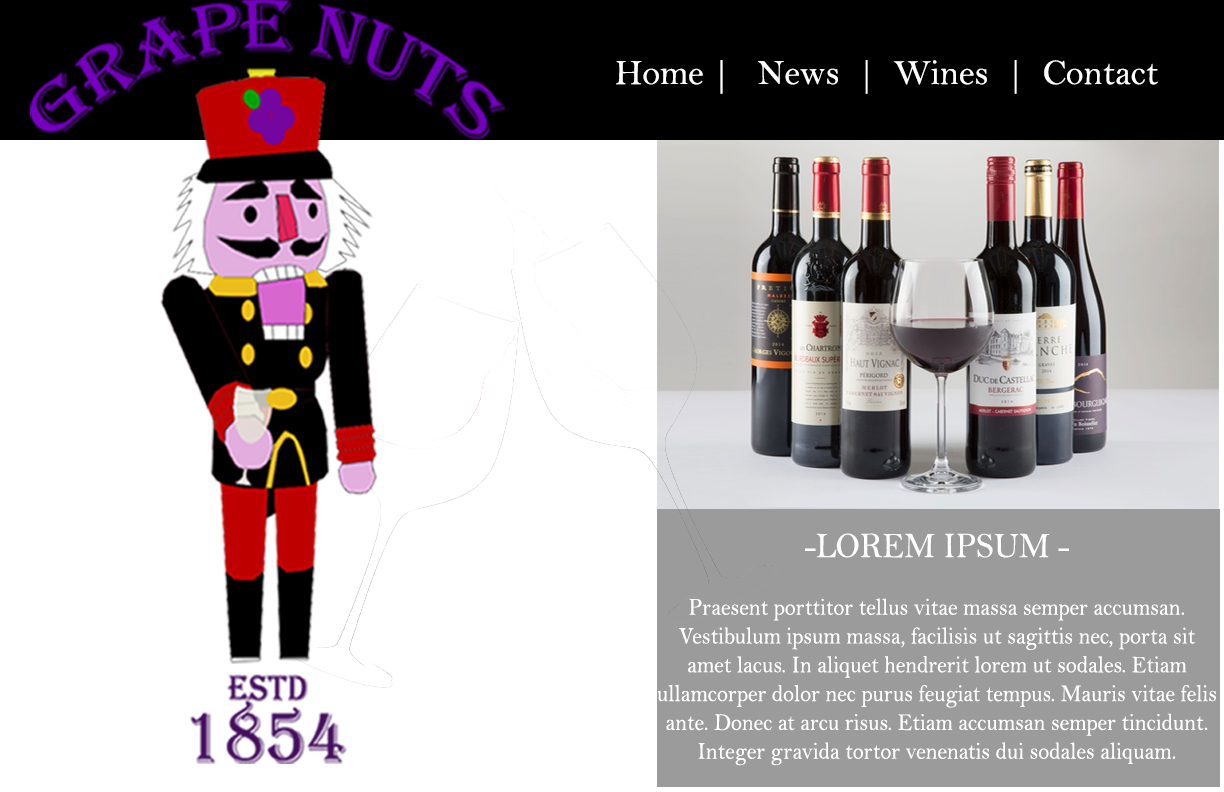
<style>
.page{position:relative;width:1224px;height:792px;background:#ffffff}
.page>*{position:absolute;margin:0}
.t1{font:36px "BellMT";color:#ffffff}
.t2{font:24px "BellMT";color:#ffffff;scale:0.92 1}
.t3{font:36px "BellMT";color:#ffffff;scale:0.92 1}
</style>
<div class="page">
<p class="t1" style="left:616px;top:60px;width:542px;height:34px">Home |   News  |  Wines  |  Contact</p>
<p class="t2" style="left:657px;top:533px;width:559px;height:233px;text-align:center"><span class="t3">-LOREM IPSUM -<br></span><br>Praesent porttitor tellus vitae massa semper accumsan. Vestibulum ipsum massa, facilisis ut sagittis nec, porta sit amet lacus. In aliquet hendrerit lorem ut sodales. Etiam ullamcorper dolor nec purus feugiat tempus. Mauris vitae felis ante. Donec at arcu risus. Etiam accumsan semper tincidunt. Integer gravida tortor venenatis dui sodales aliquam.</p>
</div>
